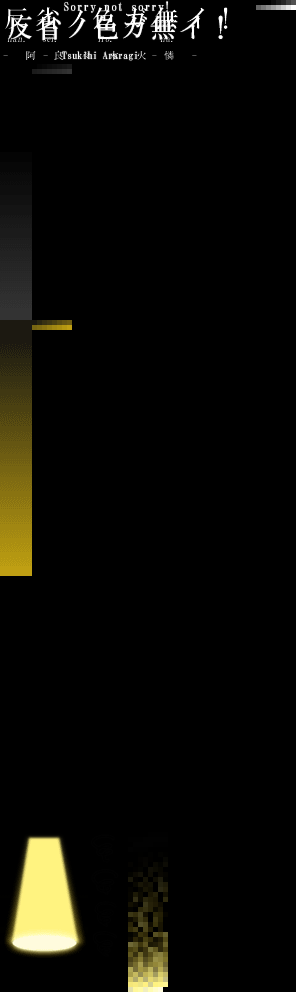
<style>
.page{position:relative;width:296px;height:992px;background:#000000}
.page>*{position:absolute;margin:0}
.t1{font:12px/11px "HGMinchoB";letter-spacing:0.075em;color:#ffffff}
.t2{font:26px/15px "HGMinchoB";letter-spacing:0.1em;color:#ffffff}
.t3{font:10px "HGMinchoB";letter-spacing:0.01em;color:#ffffff}
</style>
<div class="page">
<p class="t1" style="left:8px;top:1px;width:215px;height:40px;text-align:center">Sorry not sorry!  <br><br><span class="t2">反省ノ色ガ無イ！</span></p>
<p class="t3" style="left:62px;top:51px;width:75px;height:10px">Tsukihi Araragi</p>
</div>
